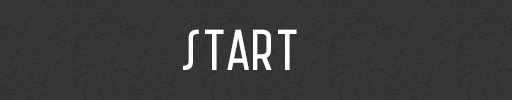
<style>
.page{position:relative;width:512px;height:100px;background:#373737}
.page>*{position:absolute;margin:0}
.t1{font:59px "SaniretroRegular";color:#ffffff}
</style>
<div class="page">
<p class="t1" style="left:183px;top:29px;width:114px;height:41px">Start</p>
</div>
